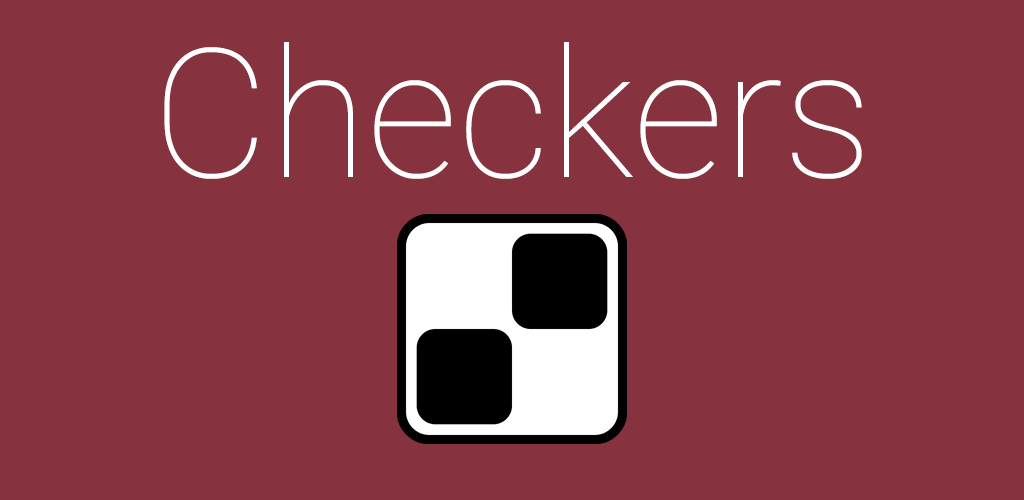
<style>
.page{position:relative;width:1024px;height:500px;background:#87333f}
.page>*{position:absolute;margin:0}
.t1{font:180px "Roboto-Thin";color:#ffffff}
</style>
<div class="page">
<p class="t1" style="left:164px;top:42px;width:698px;height:137px">Checkers</p>
</div>
